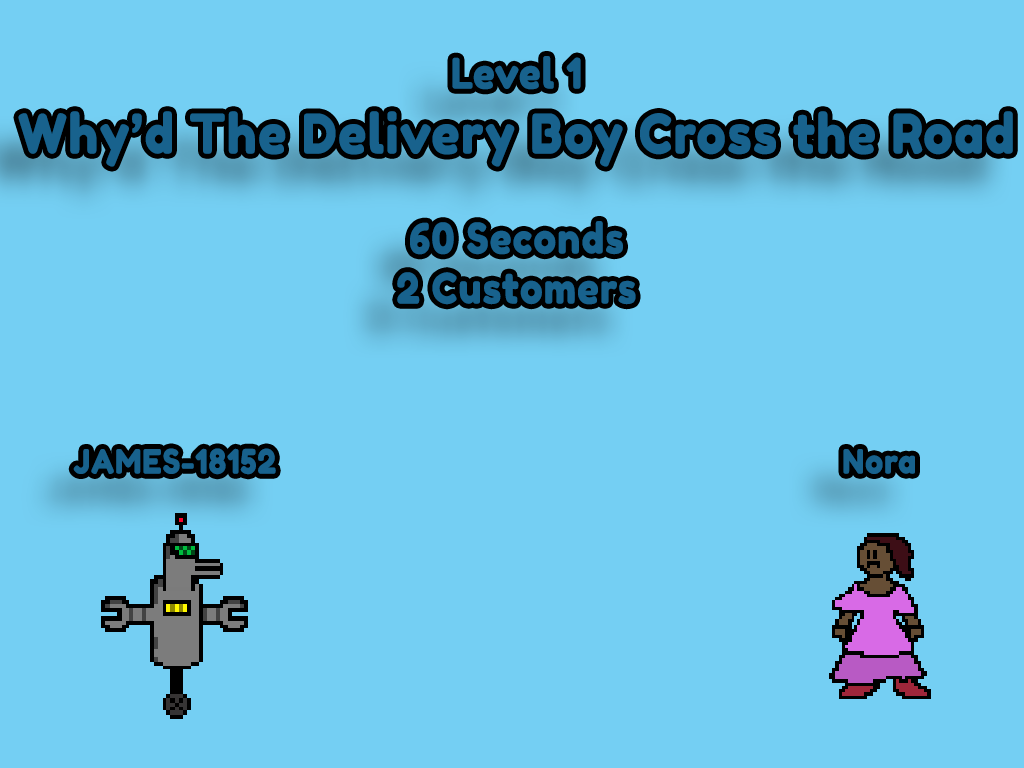
<style>
.page{position:relative;width:1024px;height:768px;background:#74cff3}
.page>*{position:absolute;margin:0}
.t1{font:33.3px "FredokaOne-Regular";letter-spacing:0.01em;color:#18628d;font-weight:bold;scale:0.9 1}
.t2{font:41.7px "FredokaOne-Regular";letter-spacing:0.01em;color:#18628d;font-weight:bold;scale:0.9 1}
.t3{font:54.2px "FredokaOne-Regular";letter-spacing:0.01em;color:#18628d;font-weight:bold;scale:0.9 1}
</style>
<div class="page">
<p class="t1" style="left:18px;top:56px;width:995px;height:419px;text-align:center"><span class="t2">Level 1<br></span><span class="t3">Why’d The Delivery Boy Cross the Road<br></span><span class="t2"><br>60 Seconds<br>2 Customers<br><br></span><br><br>JAMES-18152                                                                 Nora</p>
</div>
